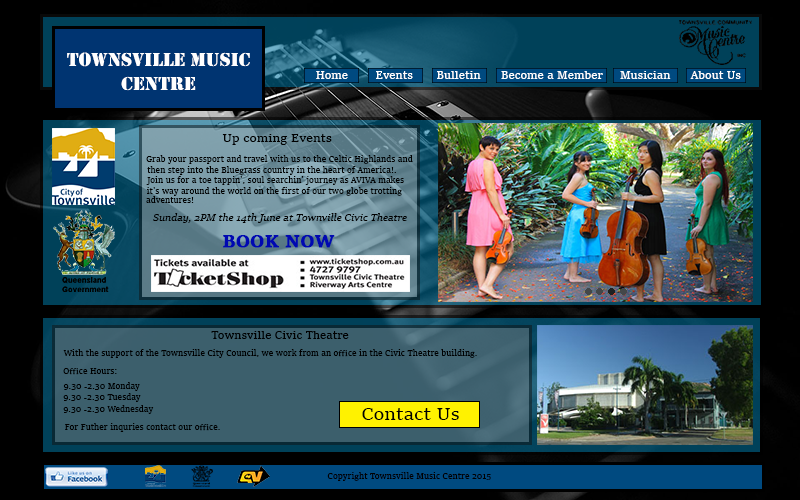
<style>
.page{position:relative;width:800px;height:500px}
.page>*{position:absolute;margin:0}
.t1{font:20px "Stencil";color:#ffffff}
.t2{font:24px "Rockwell-ExtraBold";color:#ffffff}
.t3{font:11px "SitkaSmall";color:#ffffff}
.t4{font:12px "SitkaSmall";color:#000000}
.t5{font:8px "SitkaSmall";color:#000000}
.t6{font:11px "SitkaSubheading-Italic";color:#000000}
.t7{font:18px "SitkaSmall-Bold";color:#0008b1;font-weight:bold}
.t8{font:11px "SitkaSmall";color:#000000}
.t9{font:18px "SitkaSmall";color:#000000}
</style>
<div class="page">
<p class="t1" style="left:67px;top:52px;width:183px;height:39px"><span class="t2"><br></span>Townsville Music Centre</p>
<p class="t3" style="left:316px;top:71px;width:425px;height:8px">Home        Events       Bulletin      Become a Member     Musician      About Us</p>
<p class="t4" style="left:222px;top:134px;width:110px;height:11px">Up coming Events</p>
<p class="t5" style="left:146px;top:155px;width:267px;height:9px">Grab your passport and travel with us to the Celtic Highlands and</p>
<p class="t5" style="left:147px;top:166px;width:249px;height:9px">then step into the Bluegrass country in the heart of America!.</p>
<p class="t5" style="left:146px;top:176px;width:258px;height:9px">Join us for a toe tappin', soul searchin' journey as AVIVA makes</p>
<p class="t5" style="left:146px;top:196px;width:48px;height:7px">adventures!</p>
<p class="t5" style="left:147px;top:187px;width:255px;height:9px">it's way around the world on the first of our two globe trotting</p>
<p class="t6" style="left:153px;top:213px;width:254px;height:10px">Sunday, 2PM the 14th June at Townville Civic Theatre</p>
<p class="t7" style="left:223px;top:235px;width:112px;height:13px">BOOK NOW</p>
<p class="t8" style="left:211px;top:331px;width:138px;height:8px">Townsville Civic Theatre</p>
<p class="t5" style="left:63px;top:349px;width:414px;height:9px">With the support of the Townsville City Council, we work from an office in the Civic Theatre building.</p>
<p class="t5" style="left:63px;top:368px;width:54px;height:7px">Office Hours:</p>
<p class="t5" style="left:63px;top:382px;width:77px;height:9px">9.30 -2.30 Monday</p>
<p class="t5" style="left:63px;top:393px;width:78px;height:9px">9.30 -2.30 Tuesday</p>
<p class="t5" style="left:63px;top:405px;width:91px;height:9px">9.30 -2.30 Wednesday</p>
<p class="t9" style="left:362px;top:408px;width:97px;height:12px">Contact Us</p>
<p class="t5" style="left:65px;top:423px;width:155px;height:9px">For Futher inquries contact our office.</p>
<p class="t5" style="left:327px;top:472px;width:164px;height:9px">Copyright Townsville Music Centre 2015</p>
</div>
